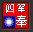
<style>
.page{position:relative;width:33px;height:32px;background:#f20000}
.page>*{position:absolute;margin:0}
.t1{font:10.4px "SimSun";color:#ffffff}
.t2{font:11.7px "SimSun";color:#ffffff}
</style>
<div class="page">
<p class="t1" style="left:6px;top:4px;width:19px;height:9px">四军</p>
<p class="t2" style="left:16px;top:15px;width:11px;height:12px">奉</p>
</div>
